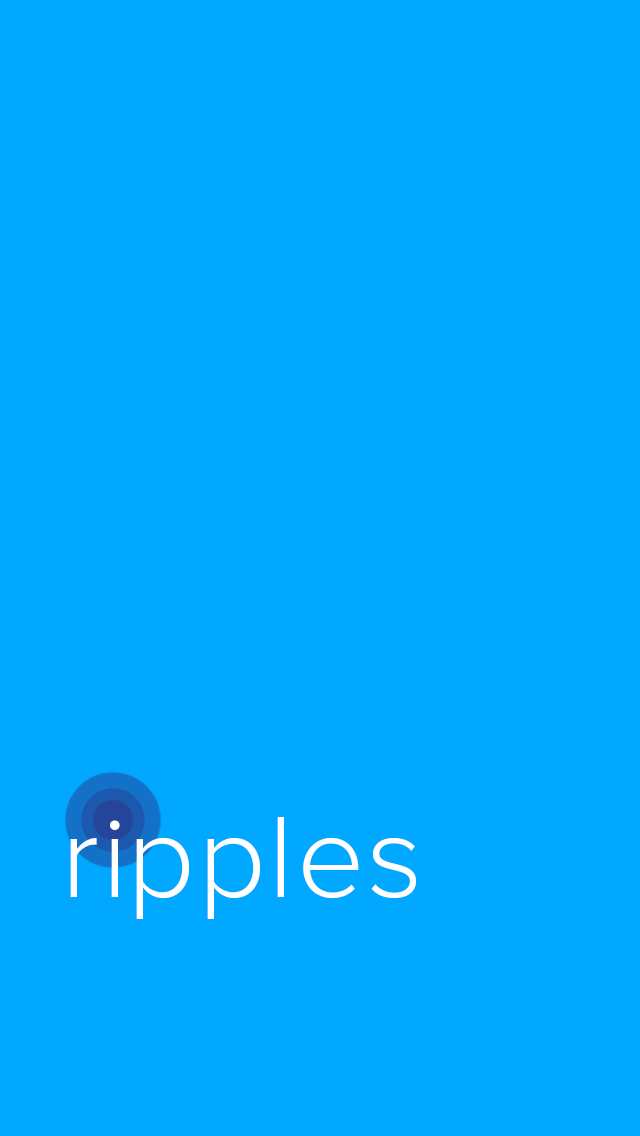
<style>
.page{position:relative;width:640px;height:1136px;background:#00a8ff}
.page>*{position:absolute;margin:0}
.t1{font:120px "ProximaNova-Light";color:#ffffff}
</style>
<div class="page">
<p class="t1" style="left:70px;top:817px;width:346px;height:102px">r ip p l e s</p>
</div>
